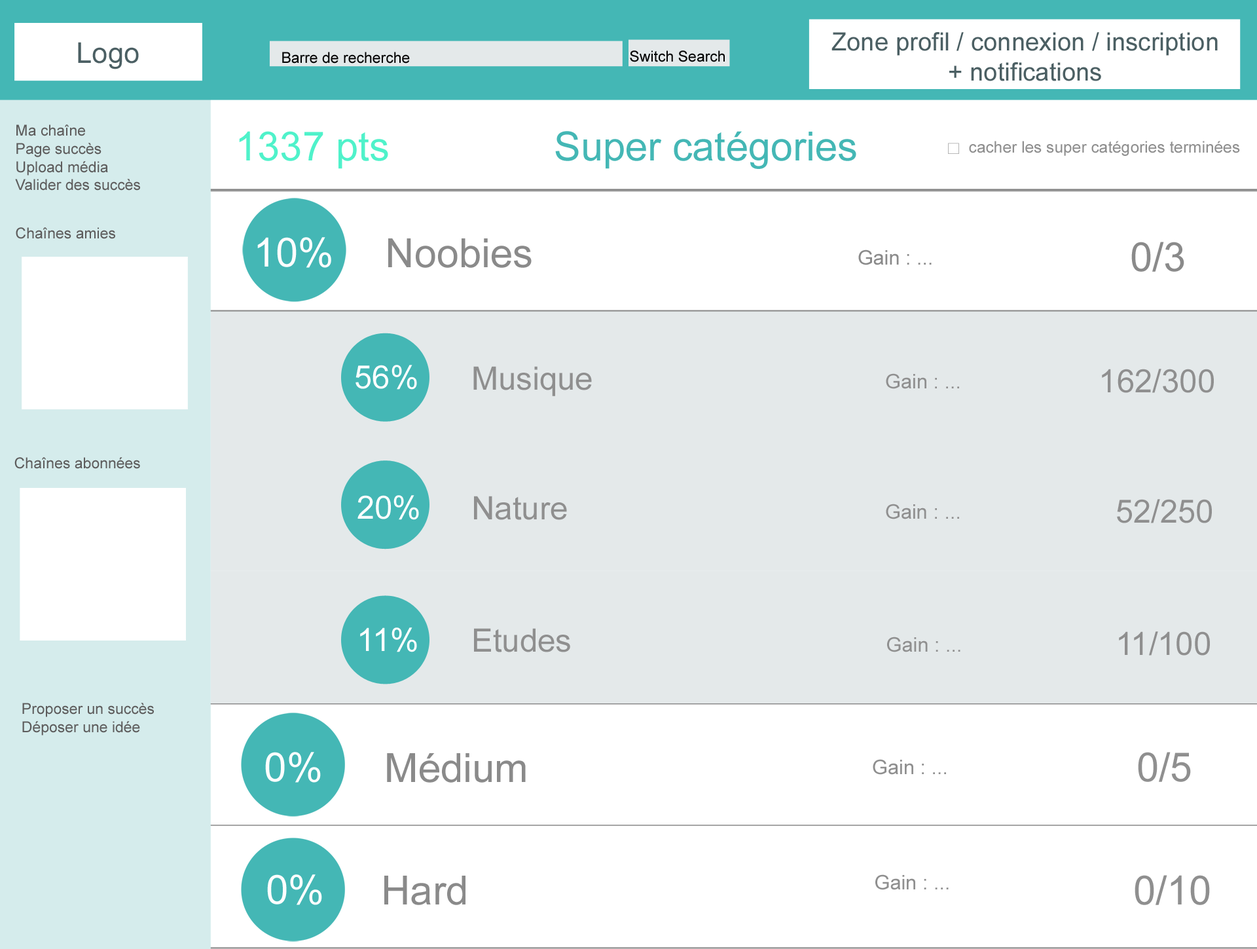
<style>
.page{position:relative;width:1257px;height:949px;background:#ffffff}
.page>*{position:absolute;margin:0}
.t1{font:28.4px "ArialMT";color:#4b5f63}
.t2{font:25.1px "ArialMT";color:#4b5f63}
.t3{font:15.1px "ArialMT";color:#000000}
.t4{font:15.1px "ArialMT";color:#5d5c5c}
.t5{font:40.2px "ArialMT";color:#4ff2ca}
.t6{font:40.2px "ArialMT";color:#44b7b5}
.t7{font:16.1px "ArialMT";color:#8f8f8f}
.t8{font:40.2px "ArialMT";color:#fefefe}
.t9{font:40.2px "ArialMT";color:#8a8a8a}
.t10{font:20.1px "ArialMT";color:#8a8a8a}
.t11{font:32.1px "ArialMT";color:#ffffff}
.t12{font:32.1px "ArialMT";color:#8f8f8f}
.t13{font:20.1px "ArialMT";color:#8f8f8f}
.t14{font:40.2px "ArialMT";color:#8f8f8f}
</style>
<div class="page">
<p class="t1" style="left:78px;top:42px;width:61px;height:27px">Logo</p>
<p class="t2" style="left:831px;top:32px;width:387px;height:49px;text-align:center">Zone profil / connexion / inscription<br>+ notifications</p>
<p class="t3" style="left:282px;top:52px;width:128px;height:12px">Barre de recherche</p>
<p class="t3" style="left:630px;top:50px;width:95px;height:12px">Switch Search</p>
<p class="t4" style="left:15px;top:124px;width:125px;height:67px">Ma chaîne<br>Page succès<br>Upload média<br>Valider des succès</p>
<p class="t5" style="left:239px;top:131px;width:149px;height:38px">1337 pts</p>
<p class="t6" style="left:555px;top:131px;width:301px;height:38px">Super catégories</p>
<p class="t7" style="left:969px;top:141px;width:271px;height:15px">cacher les super catégories terminées</p>
<p class="t4" style="left:16px;top:227px;width:99px;height:12px">Chaînes amies</p>
<p class="t8" style="left:257px;top:237px;width:74px;height:31px">10%</p>
<p class="t9" style="left:388px;top:238px;width:144px;height:30px">Noobies</p>
<p class="t9" style="left:1131px;top:242px;width:53px;height:30px">0/3</p>
<p class="t10" style="left:858px;top:249px;width:74px;height:16px">Gain : ...</p>
<p class="t11" style="left:355px;top:365px;width:62px;height:25px">56%</p>
<p class="t12" style="left:473px;top:366px;width:119px;height:30px">Musique</p>
<p class="t13" style="left:886px;top:373px;width:73px;height:16px">Gain : ...</p>
<p class="t12" style="left:1102px;top:369px;width:112px;height:24px">162/300</p>
<p class="t4" style="left:14px;top:457px;width:126px;height:12px">Chaînes abonnées</p>
<p class="t11" style="left:357px;top:495px;width:62px;height:25px">20%</p>
<p class="t12" style="left:474px;top:496px;width:93px;height:24px">Nature</p>
<p class="t13" style="left:886px;top:503px;width:73px;height:16px">Gain : ...</p>
<p class="t12" style="left:1117px;top:499px;width:95px;height:24px">52/250</p>
<p class="t11" style="left:360px;top:627px;width:57px;height:25px">11%</p>
<p class="t12" style="left:474px;top:628px;width:96px;height:24px">Etudes</p>
<p class="t13" style="left:887px;top:636px;width:73px;height:16px">Gain : ...</p>
<p class="t12" style="left:1119px;top:631px;width:91px;height:24px">11/100</p>
<p class="t4" style="left:22px;top:702px;width:132px;height:33px">Proposer un succès<br>Déposer une idée</p>
<p class="t8" style="left:265px;top:752px;width:56px;height:30px">0%</p>
<p class="t9" style="left:387px;top:753px;width:139px;height:29px">Médium</p>
<p class="t13" style="left:873px;top:759px;width:73px;height:15px">Gain : ...</p>
<p class="t14" style="left:1138px;top:752px;width:53px;height:30px">0/5</p>
<p class="t8" style="left:267px;top:874px;width:55px;height:31px">0%</p>
<p class="t9" style="left:384px;top:875px;width:81px;height:30px">Hard</p>
<p class="t13" style="left:875px;top:874px;width:74px;height:16px">Gain : ...</p>
<p class="t14" style="left:1135px;top:875px;width:75px;height:30px">0/10</p>
</div>
